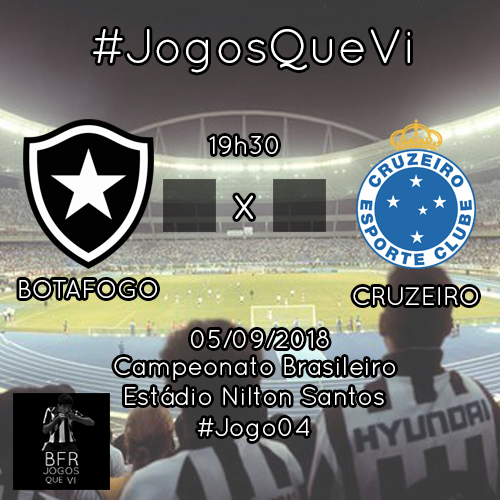
<style>
.page{position:relative;width:500px;height:500px}
.page>*{position:absolute;margin:0}
.t1{font:48px "QuicksandBook-Regular";color:#ffffff}
.t2{font:25px "QuicksandBook-Regular";color:#ffffff}
</style>
<div class="page">
<p class="t1" style="left:93px;top:29px;width:317px;height:44px">#JogosQueVi</p>
<p class="t2" style="left:209px;top:136px;width:69px;height:18px">19h30</p>
<p class="t1" style="left:235px;top:195px;width:18px;height:24px">x</p>
<p class="t2" style="left:19px;top:280px;width:138px;height:18px">BOTAFOGO</p>
<p class="t2" style="left:353px;top:287px;width:125px;height:18px">CRUZEIRO</p>
<p class="t2" style="left:191px;top:330px;width:138px;height:18px">05/09/2018</p>
<p class="t2" style="left:114px;top:357px;width:281px;height:23px">Campeonato Brasileiro</p>
<p class="t2" style="left:125px;top:387px;width:259px;height:18px">Estádio Nilton Santos</p>
<p class="t2" style="left:198px;top:418px;width:111px;height:23px">#Jogo04</p>
</div>
